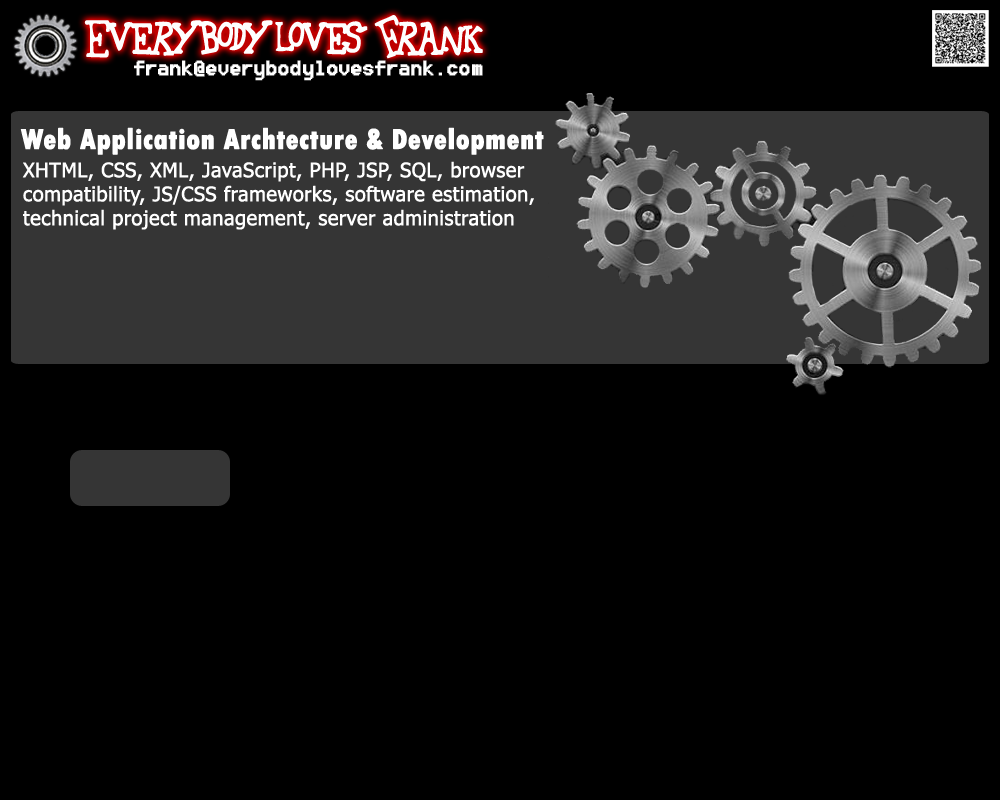
<style>
.page{position:relative;width:1000px;height:800px;background:#000000}
.page>*{position:absolute;margin:0}
.t1{font:54.7px "42Emancipated";color:#fefefe;font-weight:bold;scale:0.89 1}
.t2{font:25.6px "8514oem";color:#fefefe;font-weight:bold}
.t3{font:29.7px "TwCenMT-CondensedExtraBold";color:#ffffff;font-weight:bold}
.t4{font:20px "Tahoma";color:#ffffff;font-weight:bold}
</style>
<div class="page">
<p class="t1" style="left:84px;top:15px;width:399px;height:44px">EverybodyLovesFrank</p>
<p class="t2" style="left:134px;top:60px;width:349px;height:21px">frank@everybodylovesfrank.com</p>
<p class="t3" style="left:20px;top:127px;width:524px;height:28px">Web Application Archtecture &amp; Development</p>
<p class="t4" style="left:22px;top:161px;width:512px;height:69px">XHTML, CSS, XML, JavaScript, PHP, JSP, SQL, browser compatibility, JS/CSS frameworks, software estimation, technical project management, server administration</p>
</div>
